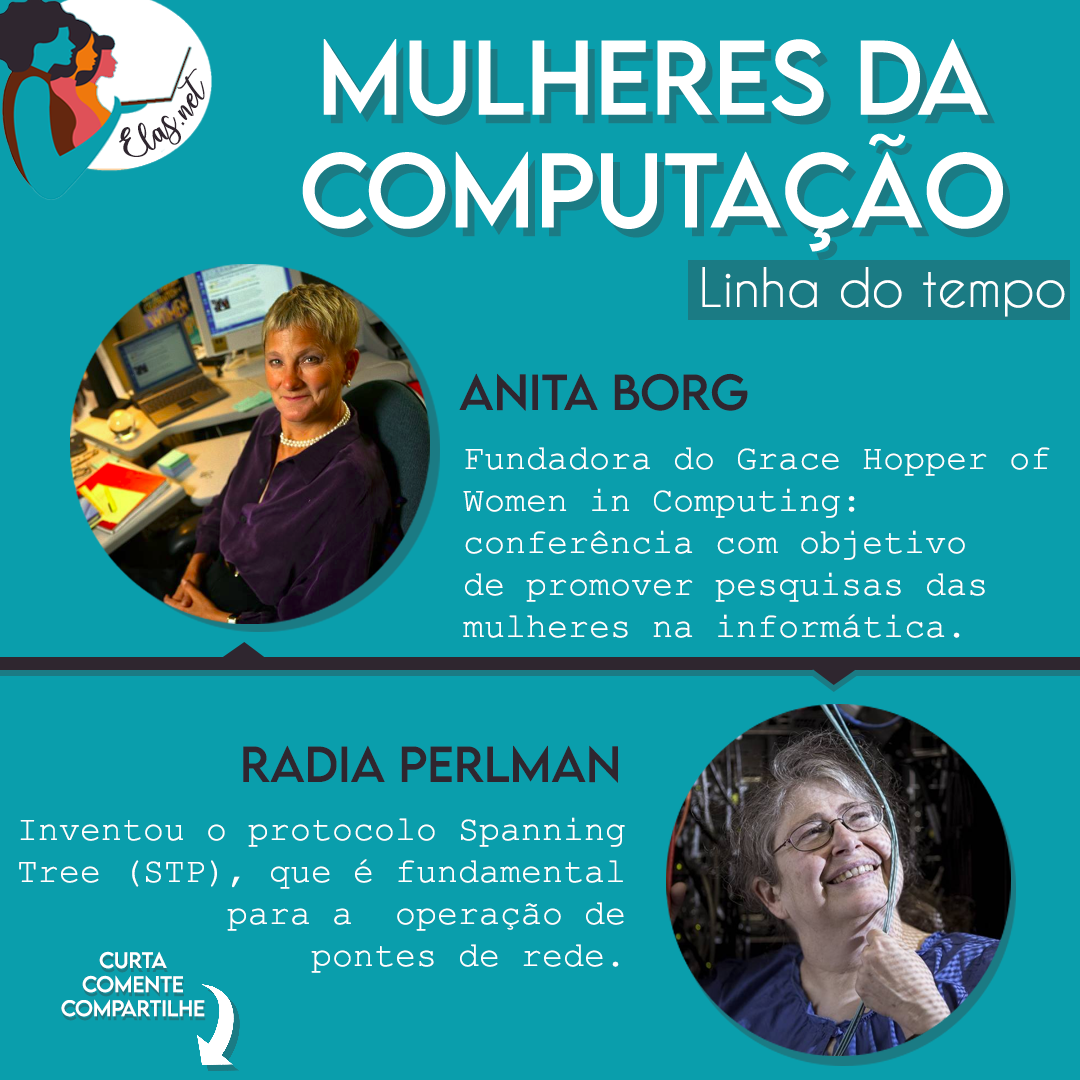
<style>
.page{position:relative;width:1080px;height:1080px;background:#0a9eac}
.page>*{position:absolute;margin:0}
.t1{font:25px "charlinda-Regular";color:#2f262f;scale:1.18 1}
.t2{font:51px "CaviarDreams";color:#ffffff}
.t3{font:45px "LEMONMILK-Regular";color:#2f262f}
.t4{font:35px "CourierNewPSMT";color:#ffffff}
.t5{font:20px "LEMONMILK-Regular";color:#ffffff}
</style>
<div class="page">
<p class="t1" style="left:119px;top:68px;width:86px;height:89px;rotate:-43deg">Elas.net</p>
<p class="t2" style="left:702px;top:267px;width:363px;height:50px">Linha do tempo</p>
<p class="t3" style="left:459px;top:373px;width:289px;height:38px">Anita Borg</p>
<p class="t4" style="left:463px;top:447px;width:587px;height:191px">Fundadora do Grace Hopper of <br>Women in Computing: <br>conferência com objetivo <br>de promover pesquisas das <br>mulheres na informática.</p>
<p class="t3" style="left:243px;top:745px;width:375px;height:38px">Radia Perlman</p>
<p class="t4" style="left:19px;top:817px;width:606px;height:156px;text-align:right">Inventou o protocolo Spanning<br>Tree (STP), que é fundamental<br>para a  operação de<br>pontes de rede.</p>
<p class="t5" style="left:61px;top:951px;width:144px;height:66px;text-align:center">Curta<br>Comente<br>Compartilhe</p>
</div>
